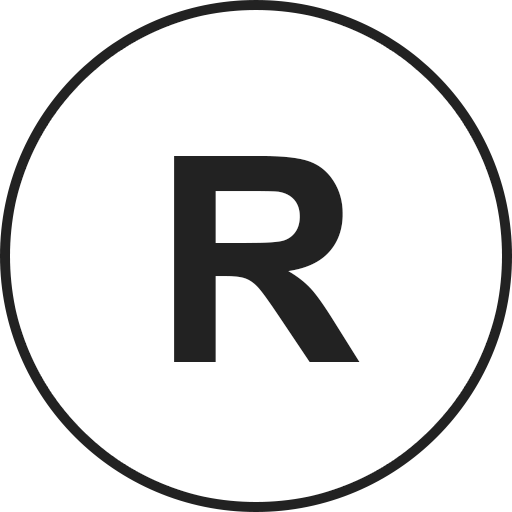
<style>
.page{position:relative;width:512px;height:512px;background:#ffffff}
.page>*{position:absolute;margin:0}
.t1{font:288px "Arial-BoldMT";color:#222222}
</style>
<div class="page">
<p class="t1" style="left:174px;top:156px;width:186px;height:206px">R</p>
</div>
